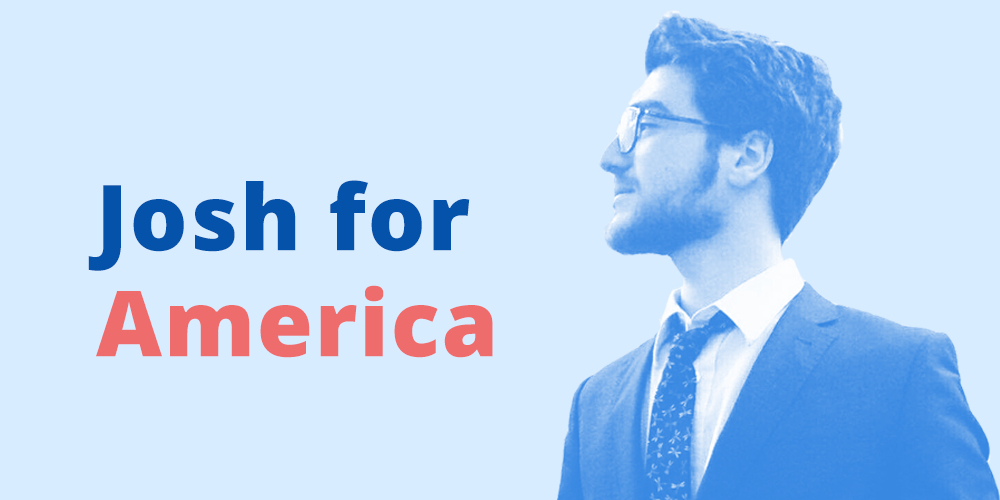
<style>
.page{position:relative;width:1000px;height:500px;background:#d7ecff}
.page>*{position:absolute;margin:0}
.t1{font:91px/106px "OpenSans-ExtraBold";letter-spacing:0.02em;color:#0452aa}
.t2{font:91px/106px "OpenSans-ExtraBold";letter-spacing:0.02em;color:#ef6c6c}
</style>
<div class="page">
<p class="t1" style="left:88px;top:180px;width:405px;height:178px">Josh for<br><span class="t2">America</span></p>
</div>
